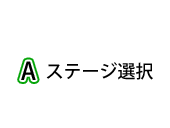
<style>
.page{position:relative;width:170px;height:128px;background:#ffffff}
.page>*{position:absolute;margin:0}
.t1{font:18px "KozGoPr6N-Medium";color:#000000}
</style>
<div class="page">
<p class="t1" style="left:46px;top:62px;width:107px;height:18px">ステージ選択</p>
</div>
